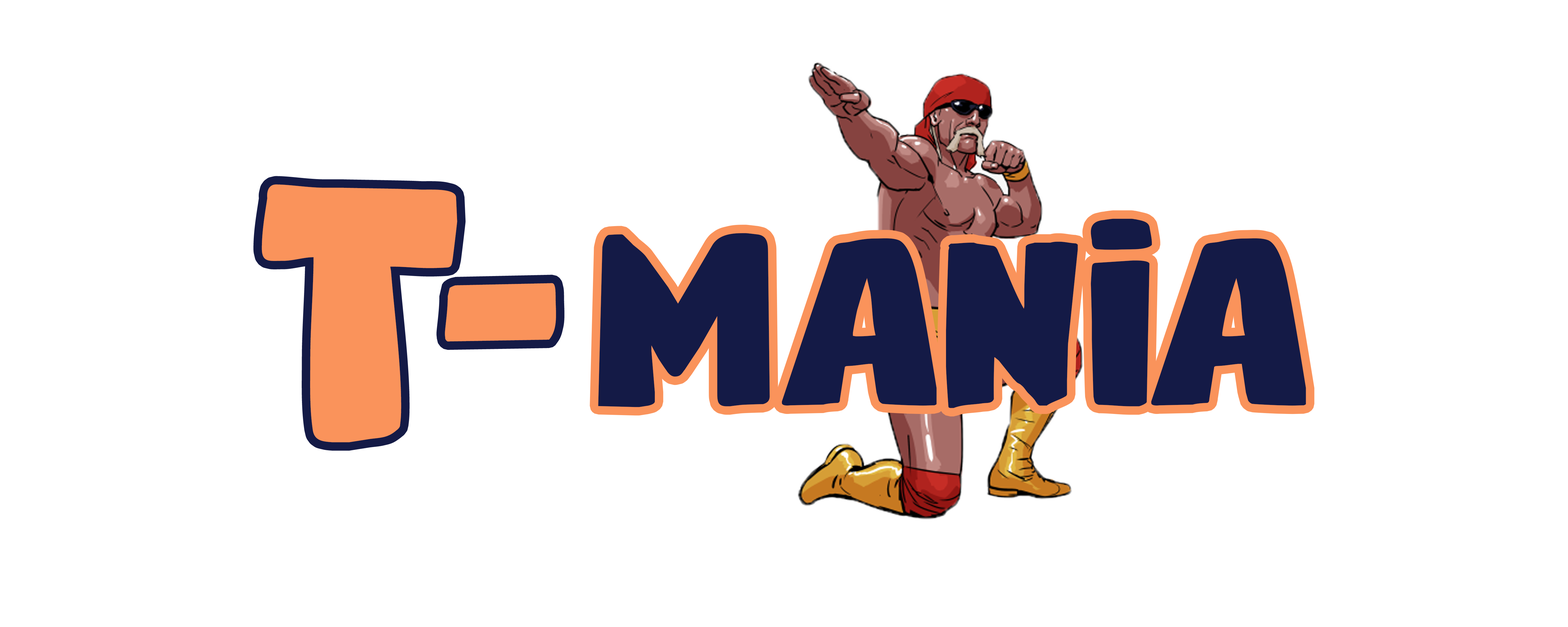
<style>
.page{position:relative;width:1568px;height:627px;background:#ffffff}
.page>*{position:absolute;margin:0}
.t1{font:361.5px "RealityCheckDEMO-Regular";color:#fa935b}
.t2{font:243.9px "RealityCheckDEMO-Regular";color:#141a46}
</style>
<div class="page">
<p class="t1" style="left:262px;top:184px;width:294px;height:259px">T-</p>
<p class="t2" style="left:598px;top:219px;width:708px;height:189px">Mania</p>
</div>
